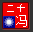
<style>
.page{position:relative;width:33px;height:32px;background:#f20000}
.page>*{position:absolute;margin:0}
.t1{font:10.4px "SimSun";color:#ffffff}
.t2{font:11.7px "SimSun";color:#ffffff}
</style>
<div class="page">
<p class="t1" style="left:7px;top:4px;width:18px;height:8px">二十</p>
<p class="t2" style="left:16px;top:15px;width:11px;height:12px">冯</p>
</div>
